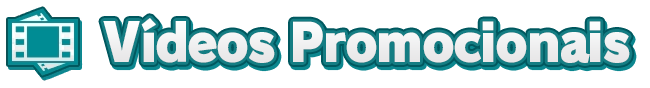
<style>
.page{position:relative;width:650px;height:88px;background:#ffffff}
.page>*{position:absolute;margin:0}
.t1{font:52px "RodinPro-UB";letter-spacing:-0.041em;color:#efeff0;scale:0.95 1}
</style>
<div class="page">
<p class="t1" style="left:103px;top:18px;width:527px;height:45px">Vídeos Promocionais</p>
</div>
